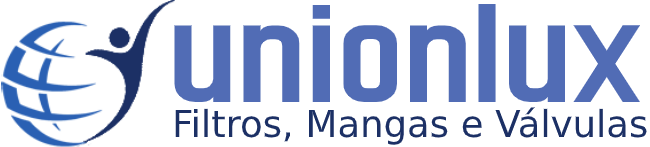
<style>
.page{position:relative;width:650px;height:147px;background:#ffffff}
.page>*{position:absolute;margin:0}
.t1{font:212.6px "Dhurjati";color:#516cb5;scale:0.73 1}
.t2{font:37px "DejaVuSans";color:#1c3065}
</style>
<div class="page">
<p class="t1" style="left:174px;top:4px;width:466px;height:98px">unionlux</p>
<p class="t2" style="left:175px;top:107px;width:472px;height:38px">Filtros, Mangas e Válvulas</p>
</div>
